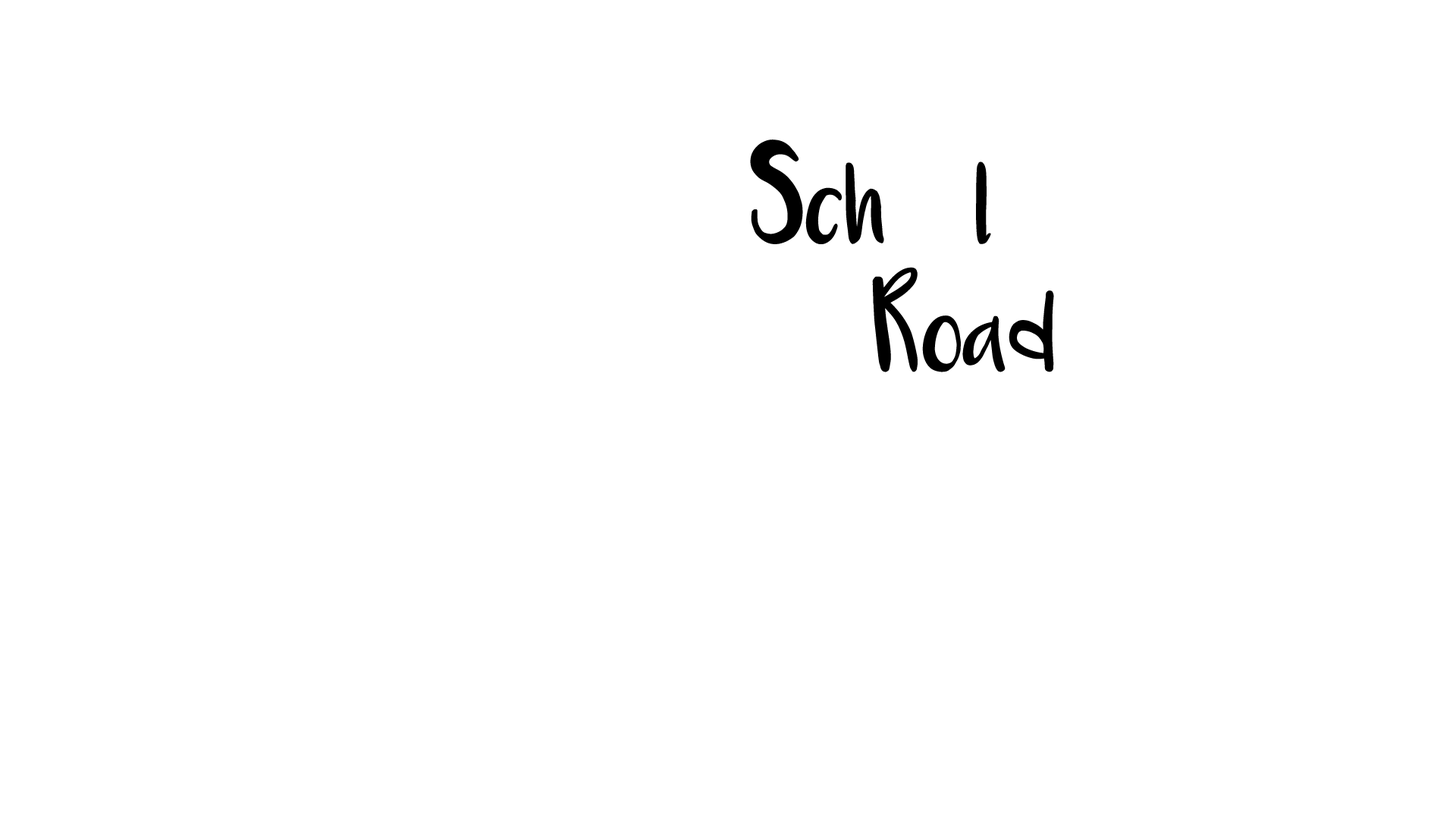
<style>
.page{position:relative;width:1456px;height:819px;background:#ffffff}
.page>*{position:absolute;margin:0}
.t1{font:54.6px "Luna";color:#000000}
.t2{font:77.3px "Luna";color:#000000}
</style>
<div class="page">
<p class="t1" style="left:750px;top:140px;width:241px;height:104px"><span class="t2">S</span>ch    l</p>
<p class="t1" style="left:872px;top:267px;width:182px;height:105px"><span class="t2">R</span>oad</p>
</div>
